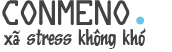
<style>
.page{position:relative;width:172px;height:52px;background:#ffffff}
.page>*{position:absolute;margin:0}
.t1{font:38px "DataControl";color:#424242}
.t2{font:21px "KentuckyFriedChickenFont";color:#424242}
</style>
<div class="page">
<p class="t1" style="left:2px;top:0px;width:128px;height:25px">Conmeno</p>
<p class="t2" style="left:4px;top:28px;width:142px;height:21px">xã stress không khó</p>
</div>
